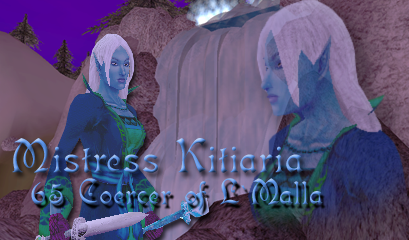
<style>
.page{position:relative;width:409px;height:240px}
.page>*{position:absolute;margin:0}
.t1{font:48px "Isabella"}
.t2{font:36px "Isabella"}
</style>
<div class="page">
<p class="t1" style="left:12px;top:138px;width:291px;height:35px">Mistress Kitiaria</p>
<p class="t2" style="left:31px;top:178px;width:292px;height:33px">65 Coercer of L`Malla</p>
</div>
